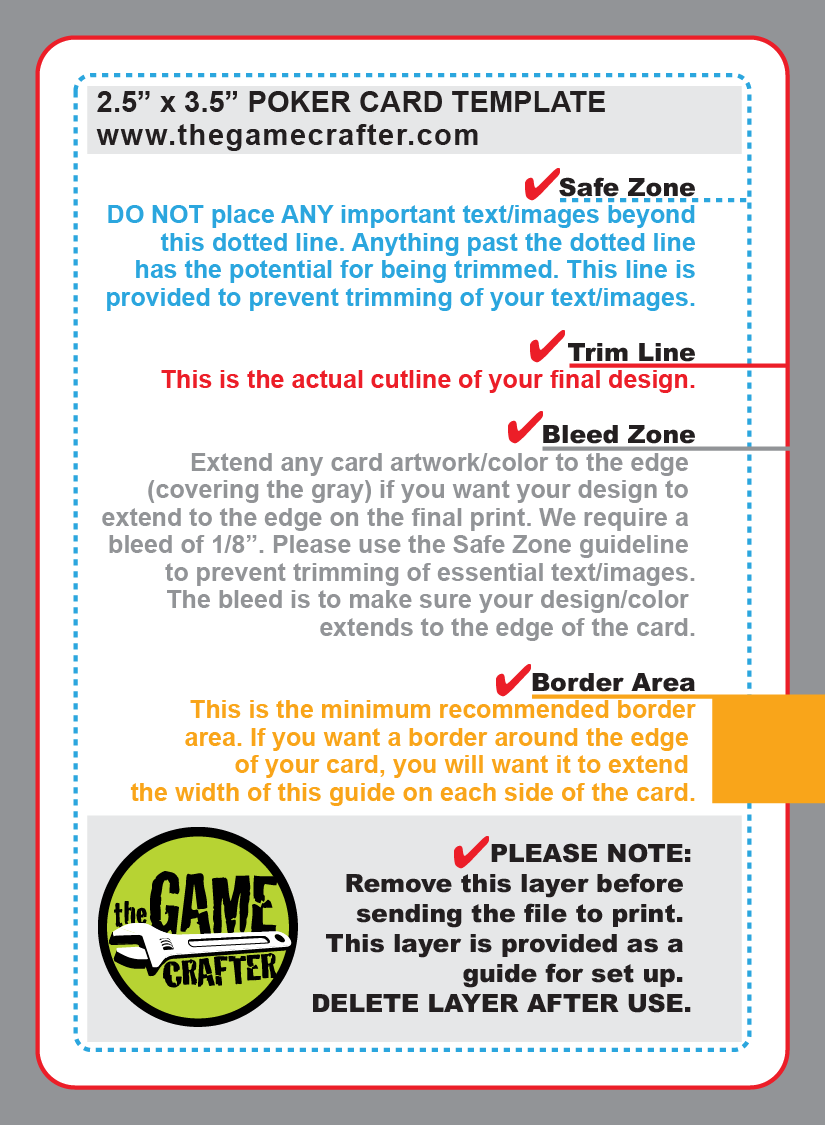
<style>
.page{position:relative;width:825px;height:1125px;background:#ffffff}
.page>*{position:absolute;margin:0}
.t1{font:29.2px/33.3px "Arial-BoldMT";color:#231f20}
.t2{font:29.2px/33.3px "Arial-BoldMT";letter-spacing:0.05em;color:#231f20}
.t3{font:25px/27.5px "Arial-BoldMT";color:#929497}
.t4{font:25px/27.5px "Arial-Black";color:#231f20}
.t5{font:25px/27.5px "Arial-BoldMT";color:#2ba6de}
.t6{font:25px/27.5px "Arial-BoldMT";color:#ec1e28}
.t7{font:25px/27.5px "Arial-BoldMT";color:#f9a51a}
.t8{font:25px "Arial-Black";color:#231f20}
</style>
<div class="page">
<p class="t1" style="left:96px;top:91px;width:509px;height:60px">2.5” x 3.5” POKER CARD TEMPLATE<br><span class="t2">www.thegamecrafter.com</span></p>
<p class="t3" style="left:102px;top:177px;width:594px;height:629px;text-align:right"><span class="t4">Safe Zone<br></span><span class="t5">DO NOT place ANY important text/images beyond<br>this dotted line. Anything past the dotted line<br>has the potential for being trimmed. This line is<br>provided to prevent trimming of your text/images.<br><br></span><span class="t4">Trim Line<br></span><span class="t6">This is the actual cutline of your final design.<br><br></span><span class="t4">Bleed Zone<br></span>Extend any card artwork/color to the edge <br>(covering the gray) if you want your design to <br>extend to the edge on the final print. We require a <br>bleed of 1/8”. Please use the Safe Zone guideline <br>  to prevent trimming of essential text/images.<br>The bleed is to make sure your design/color <br>extends to the edge of the card.<br><br><span class="t4">Border Area<br></span><span class="t7">This is the minimum recommended border<br>area. If you want a border around the edge <br>of your card, you will want it to extend <br>the width of this guide on each side of the card.</span></p>
<p class="t8" style="left:313px;top:843px;width:378px;height:170px;text-align:right">PLEASE NOTE:<br>Remove this layer before <br>sending the file to print. <br>This layer is provided as a <br>guide for set up. <br>DELETE LAYER AFTER USE.</p>
</div>
